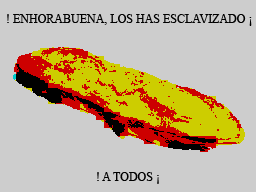
<style>
.page{position:relative;width:256px;height:192px;background:#cdcdcd}
.page>*{position:absolute;margin:0}
.t1{font:12px "TimesNewRomanPSMT";color:#000000}
</style>
<div class="page">
<p class="t1" style="left:7px;top:14px;width:245px;height:170px">! ENHORABUENA, LOS HAS ESCLAVIZADO ¡<br><br><br><br><br><br><br><br><br><br><br>                                ! A TODOS ¡</p>
</div>
